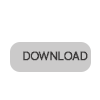
<style>
.page{position:relative;width:100px;height:100px;background:#ffffff}
.page>*{position:absolute;margin:0}
.t1{font:11.9px "MS Sans Serif";color:#3e3c3c;font-weight:bold;scale:0.91 1}
</style>
<div class="page">
<p class="t1" style="left:23px;top:51px;width:65px;height:10px">DOWNLOAD</p>
</div>
